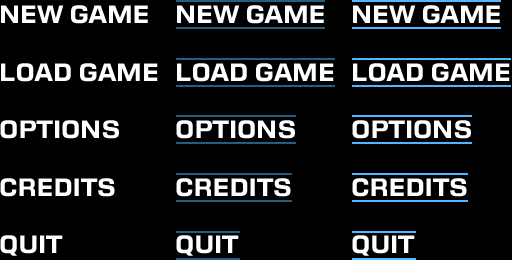
<style>
.page{position:relative;width:512px;height:260px;background:#000000}
.page>*{position:absolute;margin:0}
.t1{font:24px "Moire-Bold";color:#ffffff}
</style>
<div class="page">
<p class="t1" style="left:0px;top:5px;width:158px;height:251px">NEW GAME<br><br>LOAD GAME<br><br>OPTIONS<br><br>CREDITS<br><br>QUIT</p>
<p class="t1" style="left:176px;top:5px;width:158px;height:251px">NEW GAME<br><br>LOAD GAME<br><br>OPTIONS<br><br>CREDITS<br><br>QUIT</p>
<p class="t1" style="left:352px;top:5px;width:158px;height:251px">NEW GAME<br><br>LOAD GAME<br><br>OPTIONS<br><br>CREDITS<br><br>QUIT</p>
</div>
